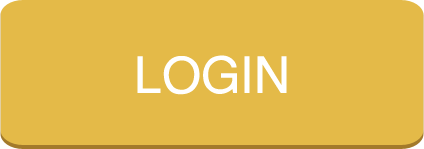
<style>
.page{position:relative;width:424px;height:149px;background:#e4ba48}
.page>*{position:absolute;margin:0}
.t1{font:50px "Helvetica-Normal";color:#ffffff}
</style>
<div class="page">
<p class="t1" style="left:137px;top:55px;width:150px;height:40px">LOGIN</p>
</div>
